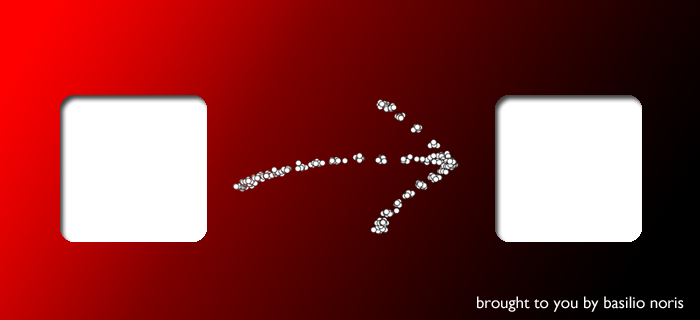
<style>
.page{position:relative;width:700px;height:320px}
.page>*{position:absolute;margin:0}
.t1{font:16.7px "GillSans";color:#ffffff}
</style>
<div class="page">
<p class="t1" style="left:477px;top:296px;width:207px;height:16px">brought to you by basilio noris</p>
</div>
